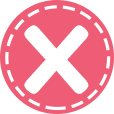
<style>
.page{position:relative;width:114px;height:114px;background:#ee5d75}
.page>*{position:absolute;margin:0}
.t1{font:90px "FredokaOne-Regular";color:#ffffff}
</style>
<div class="page">
<p class="t1" style="left:24px;top:25px;width:65px;height:69px">X</p>
</div>
